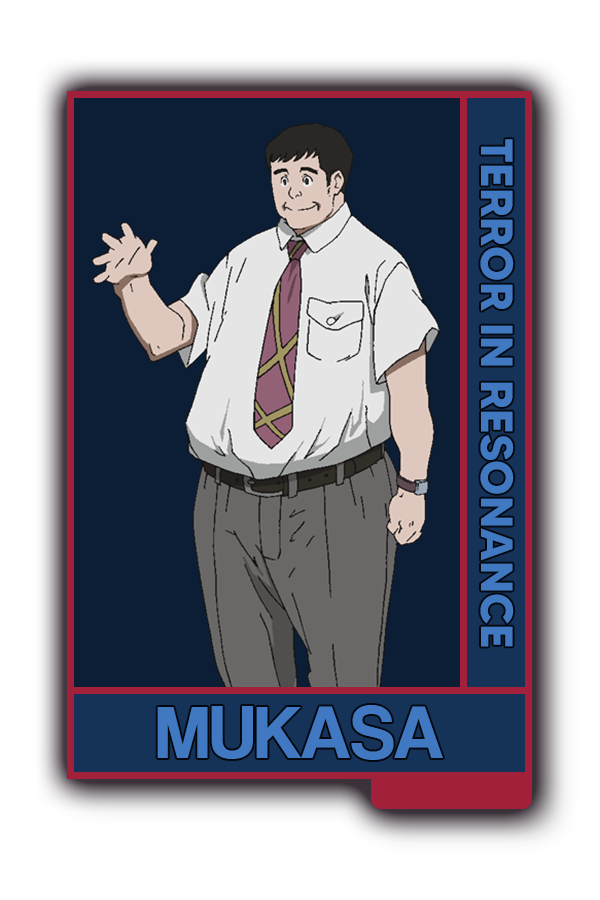
<style>
.page{position:relative;width:600px;height:900px;background:#ffffff}
.page>*{position:absolute;margin:0}
.t1{font:45.2px "MADETOMMY-Bold";color:#4079c2}
.t2{font:77px "CoolveticaRg-Regular";color:#4079c2}
</style>
<div class="page">
<p class="t1" style="left:480px;top:139px;width:34px;height:508px;rotate:90deg">TERROR IN RESONANCE</p>
<p class="t2" style="left:157px;top:705px;width:286px;height:55px">MUKASA</p>
</div>
